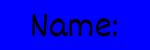
<style>
.page{position:relative;width:150px;height:50px;background:#0000ff}
.page>*{position:absolute;margin:0}
.t1{font:37px "Dekko";color:#000000}
</style>
<div class="page">
<p class="t1" style="left:32px;top:13px;width:85px;height:24px">Name:</p>
</div>
